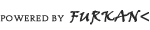
<style>
.page{position:relative;width:150px;height:30px;background:#ffffff}
.page>*{position:absolute;margin:0}
.t1{font:9px "HighTowerText-Reg";color:#282828;font-weight:bold}
.t2{font:15px "VinerHandITC";color:#282828;font-weight:bold}
.t3{font:18px "MinionPro-Bold";color:#282828;font-weight:bold}
</style>
<div class="page">
<p class="t1" style="left:0px;top:10px;width:149px;height:15px">POWERED BY  <span class="t2">FURKAN</span><span class="t3">&lt;</span></p>
</div>
